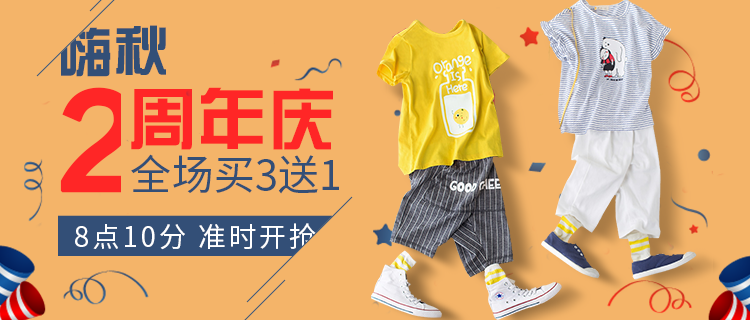
<style>
.page{position:relative;width:750px;height:320px;background:#f4b469}
.page>*{position:absolute;margin:0}
.t1{font:55.2px "BDZYJT--GB1-0";color:#334f77}
.t2{font:124.2px "FZLTZHK--GBK1-0";color:#ff2626;font-weight:bold}
.t3{font:69px "BDZYJT--GB1-0";color:#ff2626}
.t4{font:41.4px "SourceHanSansCN-Regular";color:#334f77}
.t5{font:27.6px "SourceHanSansCN-Regular";letter-spacing:0.1em;color:#fefefe}
</style>
<div class="page">
<p class="t1" style="left:61px;top:25px;width:105px;height:52px">嗨秋</p>
<p class="t2" style="left:60px;top:87px;width:74px;height:106px">2</p>
<p class="t3" style="left:131px;top:87px;width:202px;height:63px">周年庆</p>
<p class="t4" style="left:131px;top:154px;width:208px;height:40px">全场买3送1</p>
<p class="t5" style="left:75px;top:223px;width:241px;height:27px">8点10分 准时开抢</p>
</div>
